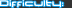
<style>
.page{position:relative;width:72px;height:8px;background:#333333}
.page>*{position:absolute;margin:0}
.t1{font:10px "ThundergodII";color:#ffffff}
</style>
<div class="page">
<p class="t1" style="left:0px;top:0px;width:64px;height:8px">Difficulty:</p>
</div>
